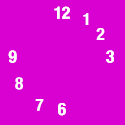
<style>
.page{position:relative;width:125px;height:125px;background:#d801d1}
.page>*{position:absolute;margin:0}
.t1{font:17.1px "HelveticaNeue-CondensedBold";color:#ffffff}
</style>
<div class="page">
<p class="t1" style="left:54px;top:6px;width:16px;height:13px">12</p>
<p class="t1" style="left:54px;top:6px;width:16px;height:13px">12</p>
<p class="t1" style="left:83px;top:13px;width:6px;height:12px">1</p>
<p class="t1" style="left:96px;top:28px;width:9px;height:12px">2</p>
<p class="t1" style="left:8px;top:50px;width:9px;height:13px">9</p>
<p class="t1" style="left:8px;top:50px;width:9px;height:13px">9</p>
<p class="t1" style="left:106px;top:50px;width:8px;height:13px">3</p>
<p class="t1" style="left:106px;top:50px;width:8px;height:13px">3</p>
<p class="t1" style="left:15px;top:77px;width:8px;height:13px">8</p>
<p class="t1" style="left:35px;top:99px;width:9px;height:12px">7</p>
<p class="t1" style="left:58px;top:103px;width:8px;height:13px">6</p>
<p class="t1" style="left:58px;top:103px;width:8px;height:13px">6</p>
</div>
